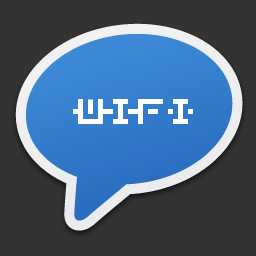
<style>
.page{position:relative;width:256px;height:256px;background:#333333}
.page>*{position:absolute;margin:0}
.t1{font:30px "BMchainA6";color:#ffffff}
</style>
<div class="page">
<p class="t1" style="left:73px;top:99px;width:120px;height:25px">WIFI</p>
</div>
